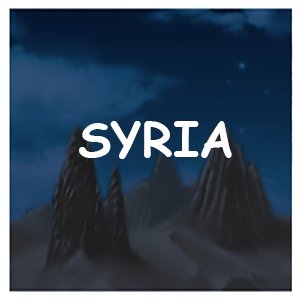
<style>
.page{position:relative;width:300px;height:300px}
.page>*{position:absolute;margin:0}
.t1{font:48px "ComicSansMS-Bold";color:#ffffff}
</style>
<div class="page">
<p class="t1" style="left:79px;top:121px;width:153px;height:38px">SYRIA</p>
</div>
